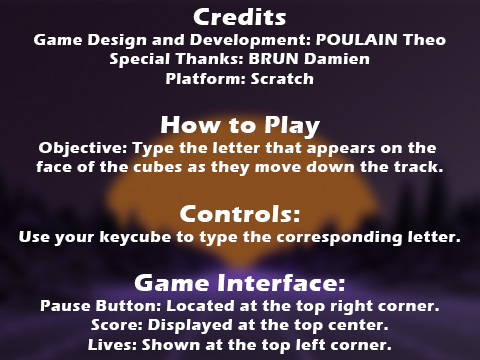
<style>
.page{position:relative;width:480px;height:360px}
.page>*{position:absolute;margin:0}
.t1{font:16.3px "ErasITC-Bold";letter-spacing:0.03em;color:#ffffff}
.t2{font:25px "ErasITC-Bold";letter-spacing:0.03em;color:#ffffff}
</style>
<div class="page">
<p class="t1" style="left:19px;top:8px;width:441px;height:346px;text-align:center"><span class="t2">Credits<br></span>Game Design and Development: POULAIN Theo<br>Special Thanks: BRUN Damien<br>Platform: Scratch<br><br><span class="t2">How to Play<br></span>Objective: Type the letter that appears on the <br>face of the cubes as they move down the track.<br><br><span class="t2">Controls:<br></span>Use your keycube to type the corresponding letter.<br><br><span class="t2">Game Interface:<br></span>Pause Button: Located at the top right corner.<br>Score: Displayed at the top center.<br>Lives: Shown at the top left corner.</p>
</div>
